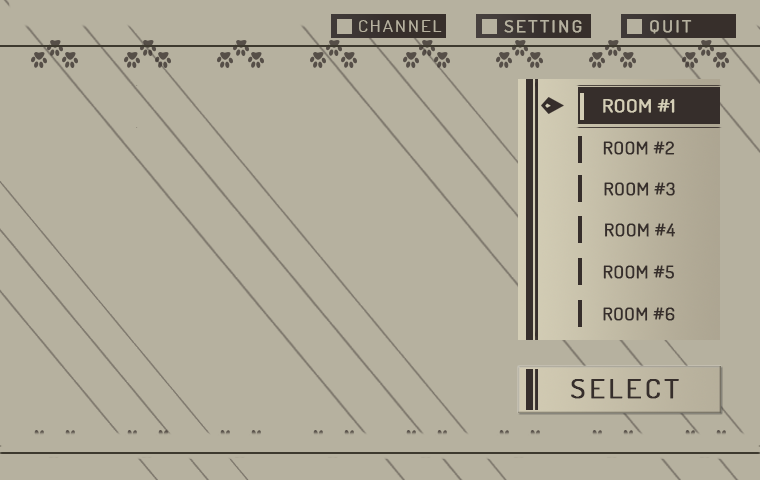
<style>
.page{position:relative;width:760px;height:480px;background:#b6b19f}
.page>*{position:absolute;margin:0}
.t1{font:16px "Dosis-Book";letter-spacing:0.1em;color:#b6b19f;scale:1.2 1}
.t2{font:16px "Dosis-Book";letter-spacing:0.1em;color:#b6b19f;font-weight:bold;scale:1.2 1}
.t3{font:16px "Dosis-Book";letter-spacing:0.1em;scale:1.2 1}
.t4{font:18px "Dosis-Book";color:#d4ceb6;font-weight:bold;scale:1.17 1}
.t5{font:16.5px "Dosis-Book";font-weight:bold;scale:1.17 1}
.t6{font:16.5px "Dosis-Book";color:#362e2b;font-weight:bold;scale:1.17 1}
.t7{font:25px "Dosis-Book";letter-spacing:0.1em;color:#362e2b;font-weight:bold;scale:1.2 1}
</style>
<div class="page">
<p class="t1" style="left:359px;top:20px;width:83px;height:12px">CHANNEL</p>
<p class="t1" style="left:359px;top:20px;width:83px;height:12px">CHANNEL</p>
<p class="t2" style="left:504px;top:20px;width:78px;height:13px">SETTING</p>
<p class="t3" style="left:650px;top:20px;width:40px;height:13px">QUIT</p>
<p class="t2" style="left:650px;top:20px;width:42px;height:14px">QUIT</p>
<p class="t4" style="left:603px;top:99px;width:72px;height:14px">ROOM #1</p>
<p class="t5" style="left:605px;top:99px;width:66px;height:14px">ROOM #1</p>
<p class="t6" style="left:603px;top:141px;width:72px;height:14px">ROOM #2</p>
<p class="t6" style="left:604px;top:182px;width:71px;height:14px">ROOM #3</p>
<p class="t6" style="left:605px;top:223px;width:70px;height:14px">ROOM #4</p>
<p class="t6" style="left:603px;top:265px;width:71px;height:14px">ROOM #5</p>
<p class="t6" style="left:603px;top:307px;width:72px;height:14px">ROOM #6</p>
<p class="t7" style="left:571px;top:379px;width:108px;height:20px">SELECT</p>
</div>
